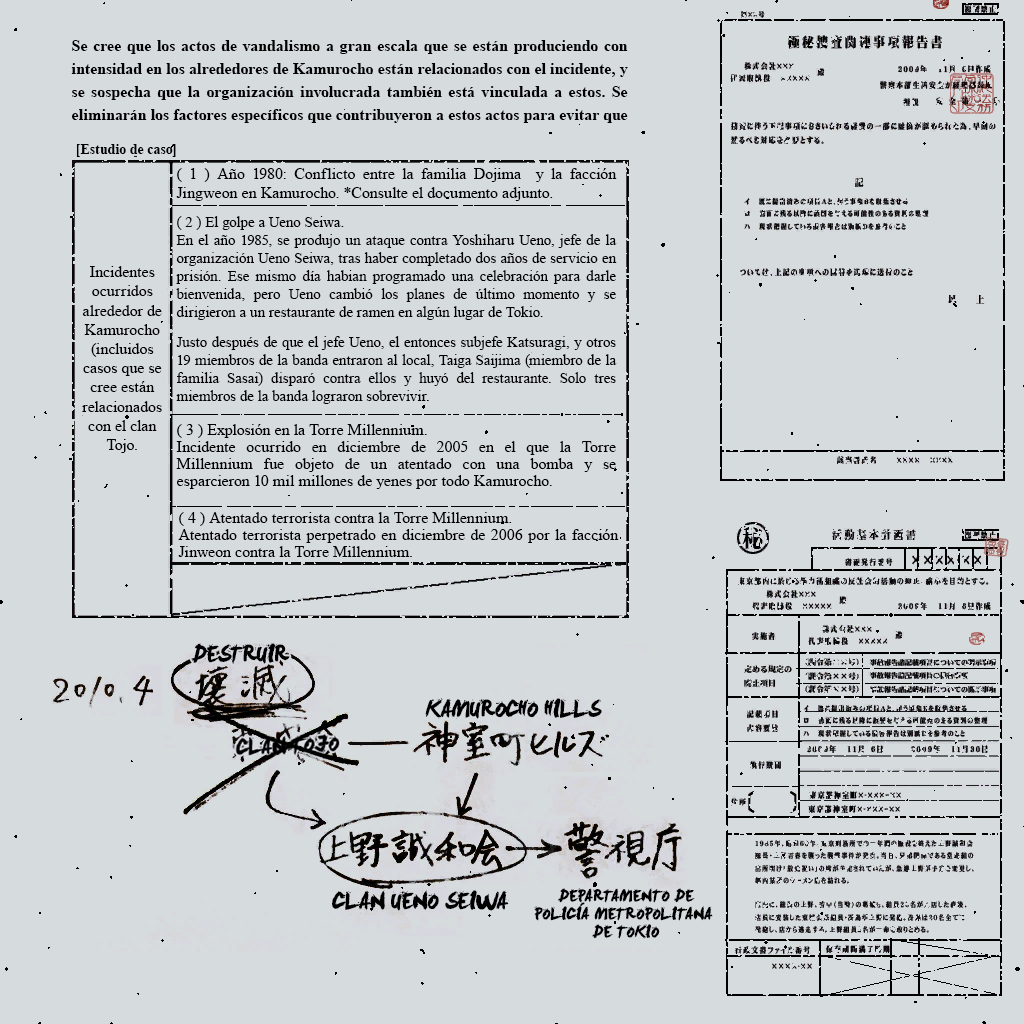
<style>
.page{position:relative;width:1024px;height:1024px;background:#d6dbde}
.page>*{position:absolute;margin:0}
.t1{font:16px/23px "TimesNewRomanPS-BoldMT";color:#000000}
.t2{font:14px "TimesNewRomanPS-BoldMT";color:#000000}
.t3{font:16px "TimesNewRomanPSMT";color:#000000}
.t4{font:15px "TimesNewRomanPSMT";color:#000000}
.t5{font:16px/17px "TimesNewRomanPSMT";color:#000000}
.t6{font:21.4px "DanLeviBrush";letter-spacing:-0.04em;color:#000000;text-transform:uppercase}
.t7{font:15px "DanLeviBrush";color:#000000;text-transform:uppercase}
</style>
<div class="page">
<p class="t1" style="left:71px;top:40px;width:557px;height:83px;text-align:justify">Se cree que los actos de vandalismo a gran escala que se están produciendo con intensidad en los alrededores de Kamurocho están relacionados con el incidente, y se sospecha que la organización involucrada también está vinculada a estos. Se eliminarán los factores específicos que contribuyeron a estos actos para evitar que se repitan.</p>
<p class="t2" style="left:76px;top:144px;width:100px;height:13px">[Estudio de caso]</p>
<p class="t3" style="left:176px;top:168px;width:441px;height:33px;text-align:justify">( 1 ) Año 1980: Conflicto entre la familia Dojima  y la facción Jingweon en Kamurocho. *Consulte el documento adjunto.</p>
<p class="t4" style="left:176px;top:216px;width:441px;height:188px;text-align:justify">( 2 ) El golpe a Ueno Seiwa.<br>En el año 1985, se produjo un ataque contra Yoshiharu Ueno, jefe de la organización Ueno Seiwa, tras haber completado dos años de servicio en prisión. Ese mismo día habian programado una celebración para darle bienvenida, pero Ueno cambió los planes de último momento y se dirigieron a un restaurante de ramen en algún lugar de Tokio.<br><br>Justo después de que el jefe Ueno, el entonces subjefe Katsuragi, y otros 19 miembros de la banda entraron al local, Taiga Saijima (miembro de la familia Sasai) disparó contra ellos y huyó del restaurante. Solo tres miembros de la banda lograron sobrevivir.</p>
<p class="t3" style="left:82px;top:266px;width:80px;height:187px;text-align:center">Incidentes ocurridos alrededor de Kamurocho (incluidos casos que se cree están relacionados con el clan Tojo.</p>
<p class="t5" style="left:176px;top:424px;width:440px;height:65px;text-align:justify">( 3 ) Explosión en la Torre Millennium.<br>Incidente ocurrido en diciembre de 2005 en el que la Torre Millennium fue objeto de un atentado con una bomba y se esparcieron 10 mil millones de yenes por todo Kamurocho.</p>
<p class="t5" style="left:178px;top:512px;width:441px;height:45px;text-align:justify">( 4 ) Atentado terrorista contra la Torre Millennium.<br>Atentado terrorista perpetrado en diciembre de 2006 por la facción Jinweon contra la Torre Millennium.</p>
<p class="t6" style="left:191px;top:643px;width:99px;height:21px">Destruir</p>
<p class="t6" style="left:425px;top:698px;width:177px;height:21px">Kamurocho Hills</p>
<p class="t6" style="left:332px;top:890px;width:177px;height:21px">clan Ueno Seiwa</p>
<p class="t7" style="left:534px;top:888px;width:179px;height:51px;text-align:center">Departamento de<br>Policía Metropolitana <br>de Tokio</p>
</div>
